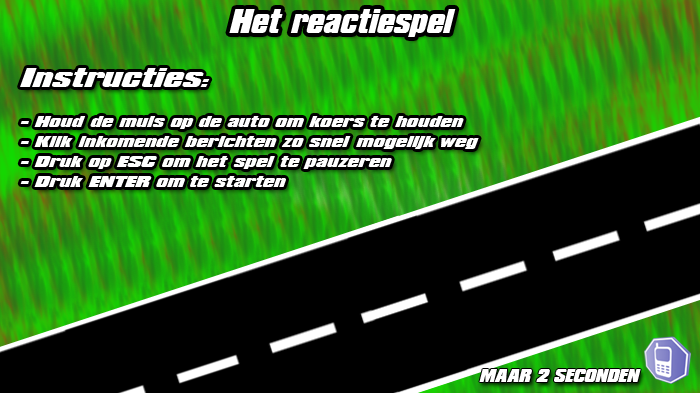
<style>
.page{position:relative;width:700px;height:393px;background:#000000}
.page>*{position:absolute;margin:0}
.t1{font:30px "LHFConvectaBASE";color:#ffffff;scale:0.7 1}
.t2{font:14px/20px "LHFConvectaBASE";color:#ffffff}
.t3{font:24px/20px "LHFConvectaBASE";color:#ffffff}
.t4{font:16.3px "LHFConvectaBASE";color:#ffffff;scale:0.7 1}
</style>
<div class="page">
<p class="t1" style="left:229px;top:9px;width:227px;height:28px">Het reactiespel</p>
<p class="t2" style="left:20px;top:68px;width:459px;height:119px"><span class="t3">Instructies:<br><br></span>- Houd de muis op de auto om koers te houden<br>- Klik inkomende berichten zo snel mogelijk weg<br>- Druk op ESC om het spel te pauzeren<br>- Druk ENTER om te starten</p>
<p class="t4" style="left:479px;top:369px;width:162px;height:13px">MAAR 2 SECONDEN</p>
</div>
